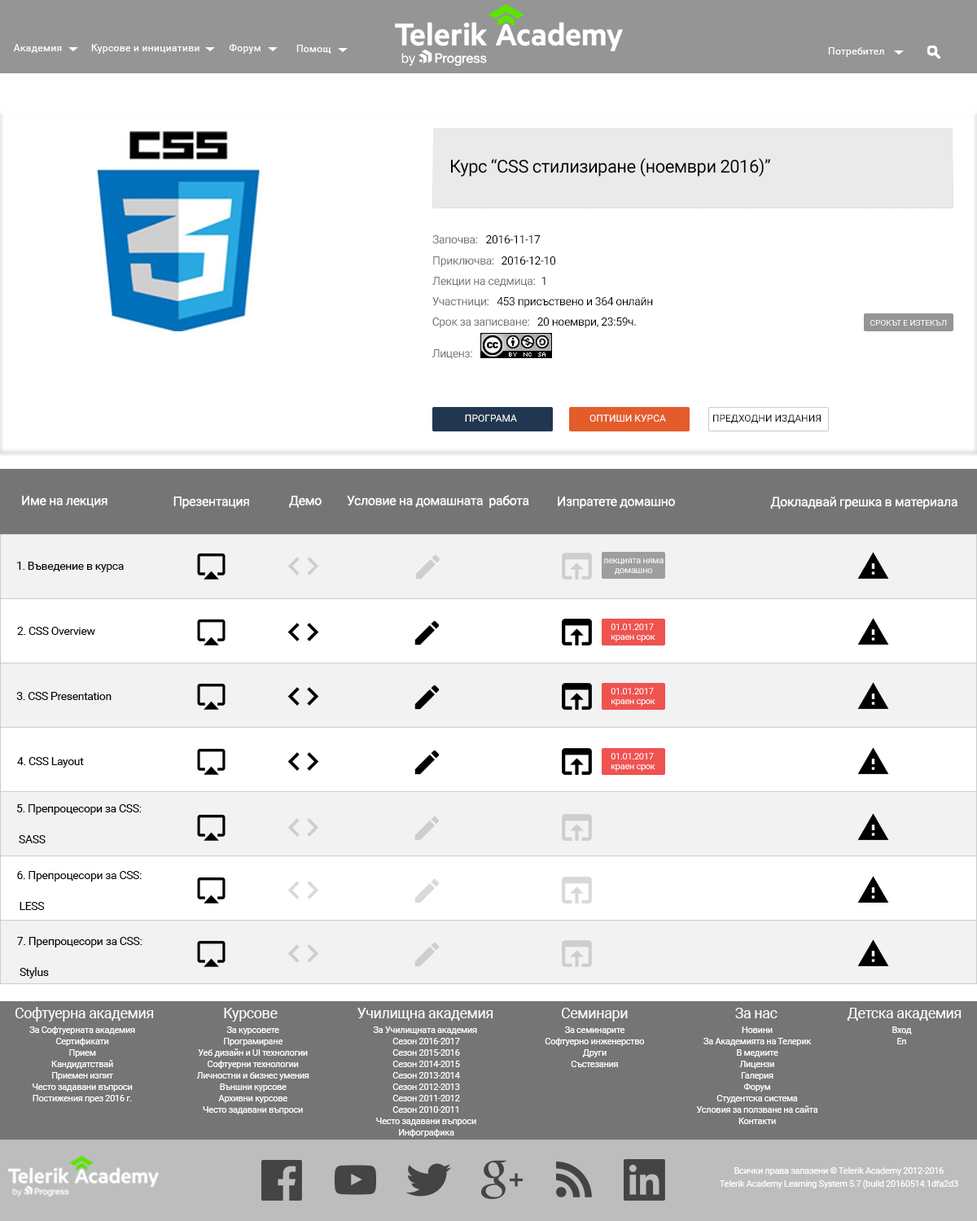
<style>
.page{position:relative;width:977px;height:1221px;background:#ffffff}
.page>*{position:absolute;margin:0}
.t1{font:9.8px "Roboto-Regular";letter-spacing:0.03em;color:#ffffff}
.t2{font:18px "Roboto-Regular";letter-spacing:-0.025em;color:#000000}
.t3{font:11.4px "Roboto-Regular";letter-spacing:-0.025em;color:#727171}
.t4{font:11.4px "Roboto-Regular";letter-spacing:-0.025em;color:#010000}
.t5{font:11.4px "Roboto-Regular";letter-spacing:-0.025em;color:#000000}
.t6{font:11.4px "Roboto-Regular";letter-spacing:-0.025em}
.t7{font:8.1px "Roboto-Regular";color:#ffffff;text-transform:uppercase}
.t8{font:9.8px "Roboto-Regular";color:#ffffff;text-transform:uppercase}
.t9{font:9.8px "Roboto-Regular";color:#000000;text-transform:uppercase}
.t10{font:13px "Roboto-Regular";letter-spacing:-0.025em;color:#ffffff}
.t11{font:9px/9.7px "Roboto-Regular";letter-spacing:-0.025em;color:#ffffff}
.t12{font:11.4px/30.9px "Roboto-Regular";letter-spacing:-0.025em;color:#000000}
.t13{font:14.7px "Roboto-Regular";letter-spacing:-0.025em;color:#fefefe}
.t14{font:9px/11.4px "Roboto-Regular";letter-spacing:-0.025em;color:#fefefe}
.t15{font:9px/13px "Roboto-Regular";letter-spacing:-0.025em;color:#ffffff}
</style>
<div class="page">
<p class="t1" style="left:13px;top:44px;width:49px;height:9px">Академия</p>
<p class="t1" style="left:91px;top:44px;width:108px;height:10px">Курсове и инициативи</p>
<p class="t1" style="left:229px;top:44px;width:31px;height:10px">Форум</p>
<p class="t1" style="left:296px;top:45px;width:35px;height:9px">Помощ</p>
<p class="t1" style="left:828px;top:47px;width:56px;height:10px">Потребител</p>
<p class="t2" style="left:451px;top:158px;width:319px;height:19px">Курс “CSS стилизиране (ноември 2016)”</p>
<p class="t3" style="left:432px;top:235px;width:46px;height:9px">Започва:</p>
<p class="t4" style="left:486px;top:235px;width:54px;height:9px">2016-11-17</p>
<p class="t3" style="left:433px;top:256px;width:61px;height:11px">Приключва:</p>
<p class="t5" style="left:501px;top:256px;width:54px;height:9px">2016-12-10</p>
<p class="t3" style="left:432px;top:277px;width:103px;height:10px">Лекции на седмица:</p>
<p class="t6" style="left:541px;top:277px;width:4px;height:8px">1</p>
<p class="t3" style="left:432px;top:297px;width:56px;height:11px">Участници:</p>
<p class="t5" style="left:496px;top:297px;width:157px;height:11px">453 присъствено и 364 онлайн</p>
<p class="t3" style="left:432px;top:317px;width:97px;height:11px">Срок за записване:</p>
<p class="t5" style="left:537px;top:317px;width:99px;height:11px">20 ноември, 23:59ч.</p>
<p class="t7" style="left:870px;top:320px;width:77px;height:6px">срокът е изтекъл</p>
<p class="t3" style="left:432px;top:349px;width:40px;height:11px">Лиценз:</p>
<p class="t8" style="left:465px;top:414px;width:52px;height:8px">програма</p>
<p class="t8" style="left:589px;top:414px;width:77px;height:8px">оптиши курса</p>
<p class="t9" style="left:713px;top:414px;width:107px;height:9px">предходни издания</p>
<p class="t10" style="left:22px;top:496px;width:85px;height:12px">Име на лекция</p>
<p class="t10" style="left:173px;top:496px;width:76px;height:13px">Презентация</p>
<p class="t10" style="left:289px;top:496px;width:32px;height:12px">Демо</p>
<p class="t10" style="left:347px;top:495px;width:182px;height:13px">Условие на домашната  работа</p>
<p class="t10" style="left:558px;top:496px;width:117px;height:13px">Изпратете домашно</p>
<p class="t10" style="left:770px;top:496px;width:187px;height:14px">Докладвай грешка в материала</p>
<p class="t5" style="left:17px;top:562px;width:107px;height:10px">1. Въведение в курса</p>
<p class="t11" style="left:603px;top:558px;width:60px;height:17px;text-align:center">лекцията няма<br>домашно</p>
<p class="t4" style="left:17px;top:627px;width:78px;height:8px">2. CSS Overview</p>
<p class="t11" style="left:610px;top:623px;width:45px;height:19px">01.01.2017 <br>краен срок</p>
<p class="t11" style="left:610px;top:688px;width:45px;height:18px">01.01.2017 <br>краен срок</p>
<p class="t5" style="left:16px;top:692px;width:96px;height:8px">3. CSS Presentation</p>
<p class="t5" style="left:17px;top:757px;width:67px;height:11px">4. CSS Layout</p>
<p class="t11" style="left:610px;top:753px;width:45px;height:19px">01.01.2017 <br>краен срок</p>
<p class="t12" style="left:16px;top:804px;width:126px;height:39px">5. Препроцесори за CSS:<br> SASS</p>
<p class="t12" style="left:17px;top:871px;width:125px;height:39px">6. Препроцесори за CSS:<br> LESS</p>
<p class="t12" style="left:17px;top:937px;width:125px;height:41px">7. Препроцесори за CSS:<br> Stylus</p>
<p class="t13" style="left:15px;top:1007px;width:139px;height:14px">Софтуерна академия</p>
<p class="t13" style="left:224px;top:1008px;width:54px;height:13px">Курсове</p>
<p class="t13" style="left:357px;top:1008px;width:136px;height:13px">Училищна академия</p>
<p class="t13" style="left:561px;top:1008px;width:67px;height:13px">Семинари</p>
<p class="t13" style="left:735px;top:1008px;width:42px;height:10px">За нас</p>
<p class="t13" style="left:846px;top:1008px;width:115px;height:13px">Детска академия</p>
<p class="t14" style="left:29px;top:1026px;width:106px;height:77px;text-align:center">За Софтуерната академия<br> Сертификати<br> Прием<br> Кандидатствай<br> Приемен изпит<br> Често задавани въпроси<br> Постижения през 2016 г.</p>
<p class="t14" style="left:196px;top:1026px;width:113px;height:88px;text-align:center">За курсовете<br> Програмиране<br> Уеб дизайн и UI технологии<br> Софтуерни технологии<br> Личностни и бизнес умения<br> Външни курсове<br> Архивни курсове<br> Често задавани въпроси</p>
<p class="t14" style="left:373px;top:1026px;width:104px;height:111px;text-align:center">За Училищната академия<br> Сезон 2016-2017<br> Сезон 2015-2016<br> Сезон 2014-2015<br> Сезон 2013-2014<br> Сезон 2012-2013<br> Сезон 2011-2012<br> Сезон 2010-2011<br> Често задавани въпроси<br> Инфографика</p>
<p class="t14" style="left:545px;top:1026px;width:100px;height:41px;text-align:center">За семинарите<br> Софтуерно инженерство<br> Други<br> Състезания</p>
<p class="t14" style="left:696px;top:1026px;width:122px;height:98px;text-align:center">Новини<br> За Академията на Телерик<br> В медиите<br> Лицензи<br> Галерия<br> Форум<br> Студентска система<br> Условия за ползване на сайта<br> Контакти</p>
<p class="t14" style="left:892px;top:1026px;width:20px;height:18px;text-align:center">Вход<br>En</p>
<p class="t15" style="left:719px;top:1167px;width:239px;height:22px;text-align:center">Всички права запазени © Telerik Academy 2012-2016<br>Telerik Academy Learning System 5.7 (build 20160514.1dfa2d3</p>
</div>
